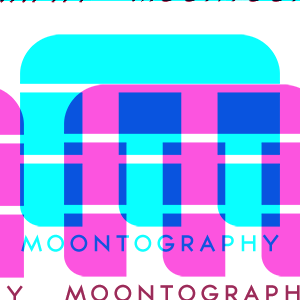
<style>
.page{position:relative;width:300px;height:300px;background:#ffffff}
.page>*{position:absolute;margin:0}
.t1{font:20.8px "TYPOGRAPHPRO-SemiBold";letter-spacing:0.2em}
</style>
<div class="page">
<p class="t1" style="left:21px;top:233px;width:258px;height:18px">MOONTOGRAPHY</p>
</div>
